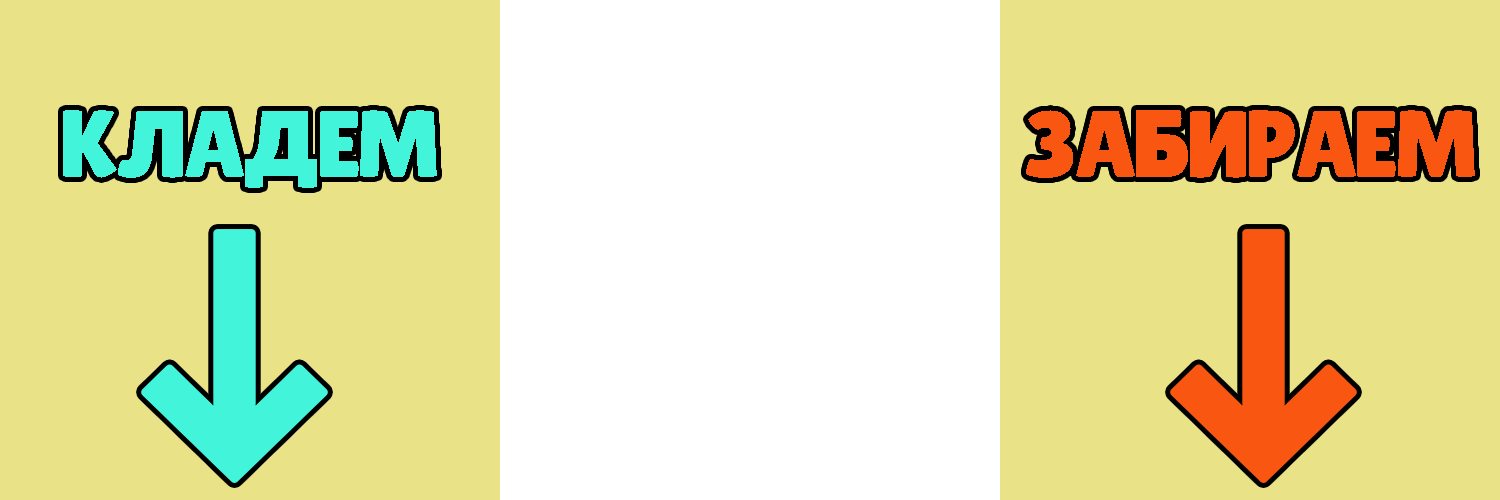
<style>
.page{position:relative;width:1500px;height:500px;background:#e9e286}
.page>*{position:absolute;margin:0}
.t1{font:95px "LilitaOneRus";color:#41f4da}
.t2{font:95px "LilitaOneRus";color:#f95611}
</style>
<div class="page">
<p class="t1" style="left:63px;top:110px;width:374px;height:78px">КЛАДЕМ</p>
<p class="t2" style="left:1026px;top:110px;width:449px;height:68px">ЗАБИРАЕМ</p>
</div>
